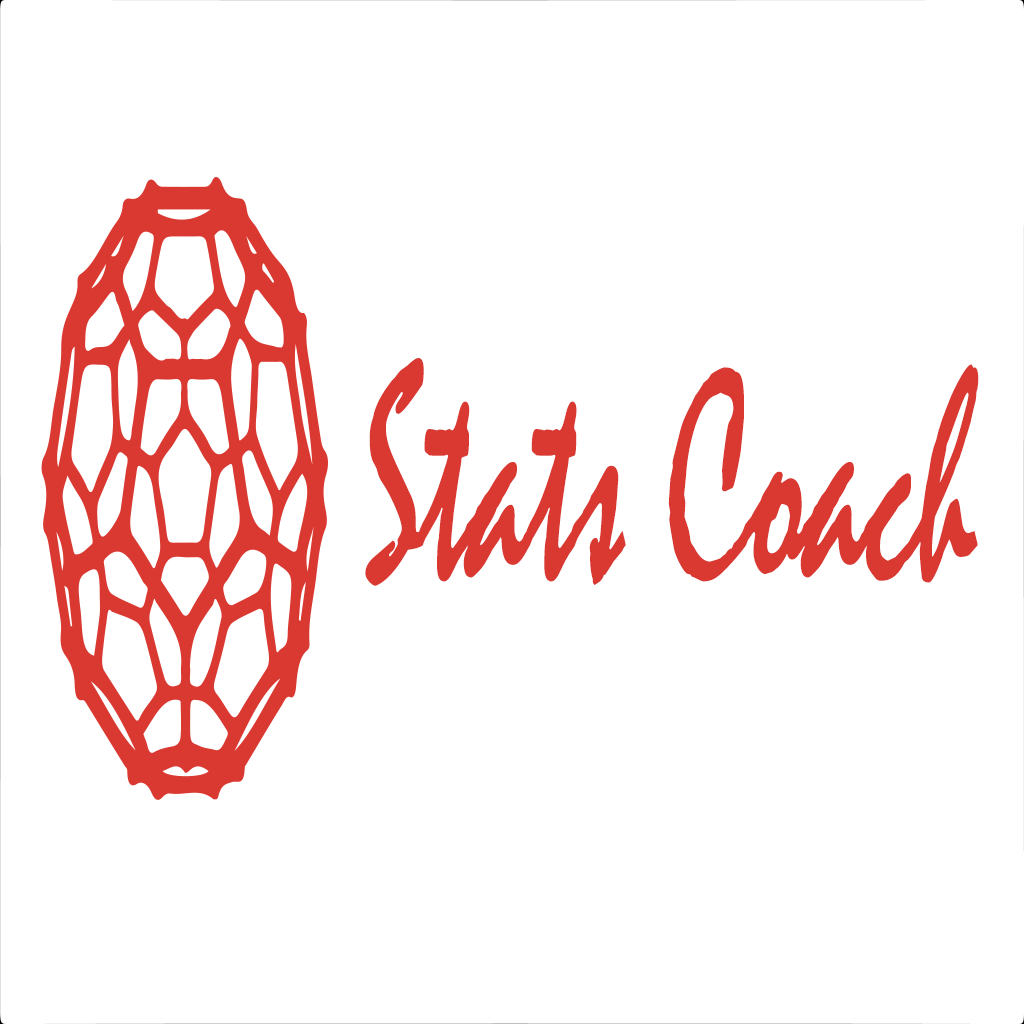
<style>
.page{position:relative;width:1024px;height:1024px;background:#ffffff}
.page>*{position:absolute;margin:0}
.t1{font:307.5px "Mistral";color:#da3932;scale:0.54 1}
</style>
<div class="page">
<p class="t1" style="left:365px;top:358px;width:614px;height:228px">Stats Coach</p>
</div>
